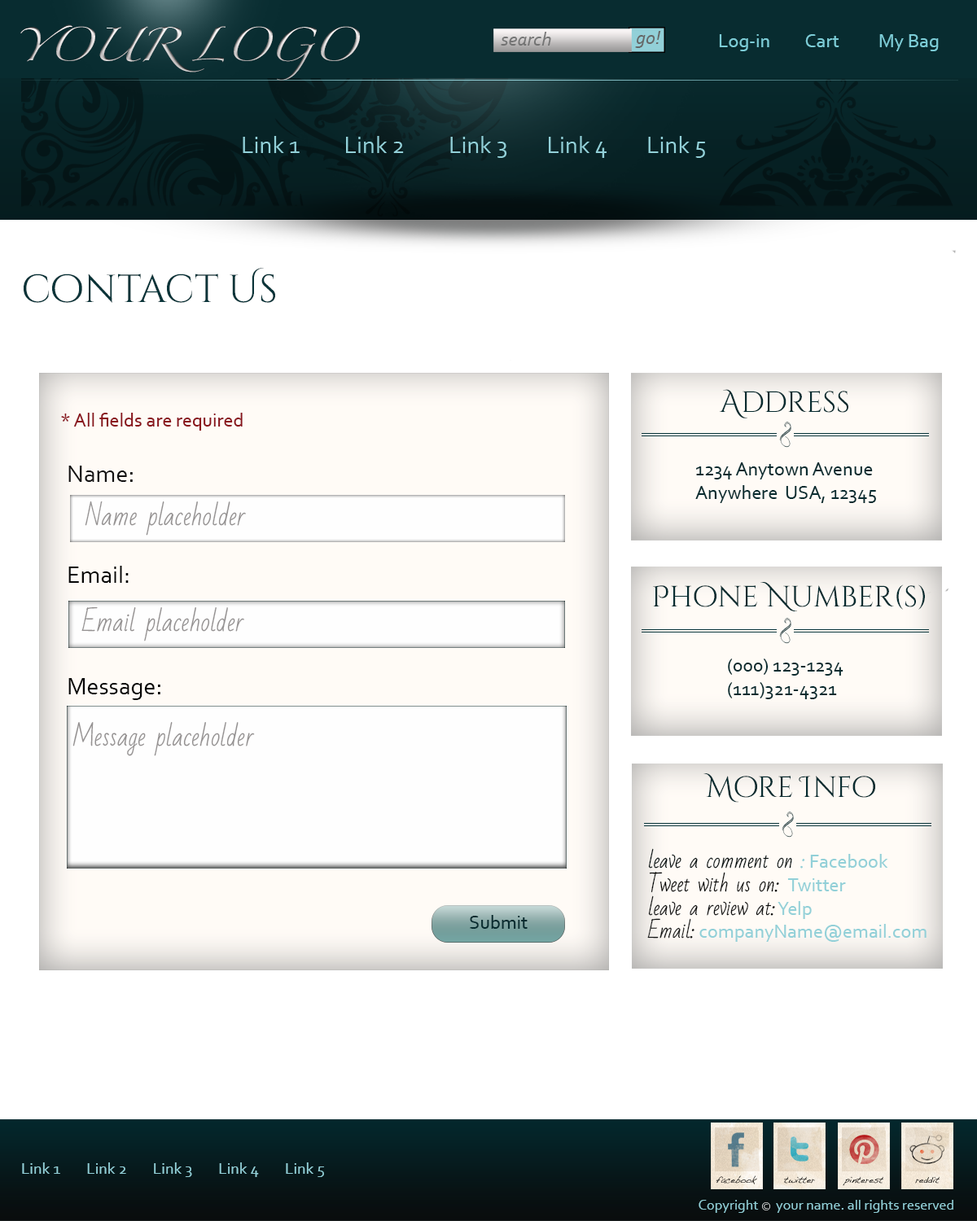
<style>
.page{position:relative;width:977px;height:1221px;background:#ffffff}
.page>*{position:absolute;margin:0}
.t1{font:30.1px "Zapfino"}
.t2{font:19.5px "Corbel-Italic";color:#666767}
.t3{font:19.5px "Corbel";color:#7bccd6}
.t4{font:39.1px "CinzelDecorative-Regular";color:#083439}
.t5{font:29.3px "CinzelDecorative-Regular";color:#082c30}
.t6{font:19.5px "Corbel";color:#8a141c}
.t7{font:15.5px "RespectiveSwashesSlanted";scale:0.9 1}
.t8{font:24.4px "Corbel";color:#131212}
.t9{font:19.5px "Corbel";color:#082c30}
.t10{font:24.4px "BadScript-Regular";color:#949191}
.t11{font:24.4px "Corbel";color:#060606}
.t12{font:19.5px "Corbel";color:#92d0d8}
.t13{font:19.5px "BadScript-Regular";color:#010b0c}
.t14{font:19.5px "BadScript-Regular";color:#92d0d8}
.t15{font:19.5px "BadScript-Regular";color:#020303}
.t16{font:19.5px "BadScript-Regular";color:#0c0d0d}
.t17{font:19.5px "BadScript-Regular";color:#131414}
.t18{font:16.3px "Corbel";color:#92d0d8}
.t19{font:14.7px "Corbel";color:#92d0d8}
</style>
<div class="page">
<p class="t1" style="left:20px;top:24px;width:340px;height:57px">YOUR LOGO</p>
<p class="t2" style="left:501px;top:32px;width:50px;height:14px;opacity:0.88">search</p>
<p class="t2" style="left:635px;top:31px;width:26px;height:17px">go!</p>
<p class="t3" style="left:719px;top:34px;width:219px;height:17px">Log-in         Cart          My Bag</p>
<p class="t4" style="left:24px;top:268px;width:251px;height:35px">contact Us</p>
<p class="t5" style="left:719px;top:389px;width:129px;height:29px">Address</p>
<p class="t6" style="left:61px;top:413px;width:182px;height:18px">* All fields are required</p>
<p class="t7" style="left:779px;top:422px;width:12px;height:26px;rotate:-65deg">I</p>
<p class="t8" style="left:68px;top:466px;width:65px;height:16px">Name:</p>
<p class="t9" style="left:695px;top:462px;width:181px;height:41px">1234 Anytown Avenue<br>Anywhere  USA, 12345</p>
<p class="t10" style="left:85px;top:501px;width:161px;height:35px">Name placeholder</p>
<p class="t11" style="left:68px;top:566px;width:61px;height:17px">Email:</p>
<p class="t5" style="left:653px;top:582px;width:272px;height:29px">Phone Number(s)</p>
<p class="t10" style="left:81px;top:606px;width:163px;height:35px">Email placeholder</p>
<p class="t7" style="left:779px;top:618px;width:12px;height:26px;rotate:-65deg">I</p>
<p class="t9" style="left:728px;top:658px;width:115px;height:41px">(000) 123-1234<br>(111)321-4321</p>
<p class="t11" style="left:68px;top:678px;width:92px;height:22px">Message:</p>
<p class="t10" style="left:72px;top:722px;width:183px;height:34px">Message placeholder</p>
<p class="t5" style="left:703px;top:773px;width:173px;height:30px">More Info</p>
<p class="t7" style="left:781px;top:811px;width:13px;height:27px;rotate:-65deg">I</p>
<p class="t12" style="left:647px;top:848px;width:279px;height:94px"><span class="t13">leave a comment on</span><span class="t14"> :</span> Facebook<br><span class="t15">Tweet with us on: </span>Twitter<br><span class="t16">leave a review at: </span>Yelp<br><span class="t17">Email:</span> companyName@email.com</p>
<p class="t9" style="left:470px;top:915px;width:57px;height:14px">Submit</p>
<p class="t18" style="left:22px;top:1162px;width:302px;height:15px">Link 1        Link 2        Link 3        Link 4        Link 5</p>
<p class="t19" style="left:698px;top:1200px;width:255px;height:13px">Copyright      your name. all rights reserved</p>
</div>
